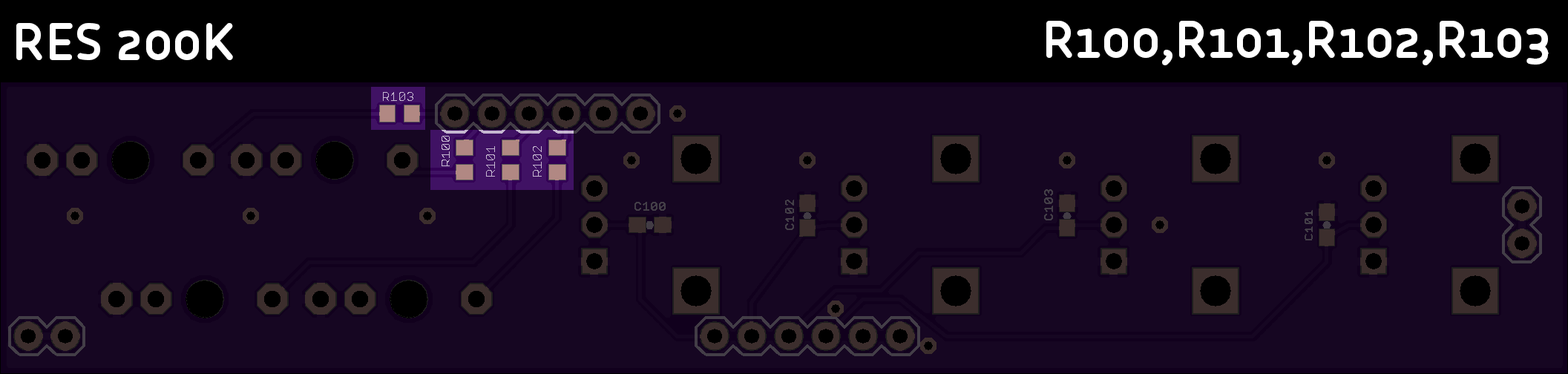
<style>
.page{position:relative;width:1568px;height:374px;background:#160622}
.page>*{position:absolute;margin:0}
.t1{font:53.4px "CoreHumanistSans-Bold";color:#ffffff}
</style>
<div class="page">
<p class="t1" style="left:16px;top:23px;width:217px;height:37px">RES 200K</p>
<p class="t1" style="left:1046px;top:21px;width:503px;height:44px">R100,R101,R102,R103</p>
</div>
